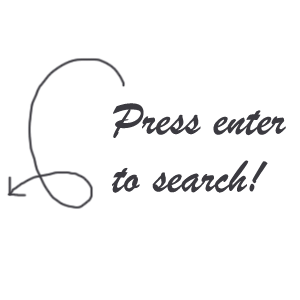
<style>
.page{position:relative;width:300px;height:300px;background:#ffffff}
.page>*{position:absolute;margin:0}
.t1{font:48px "BrushScriptMT";color:#3b3a40}
</style>
<div class="page">
<p class="t1" style="left:112px;top:103px;width:174px;height:90px">Press enter<br>to search!</p>
</div>
